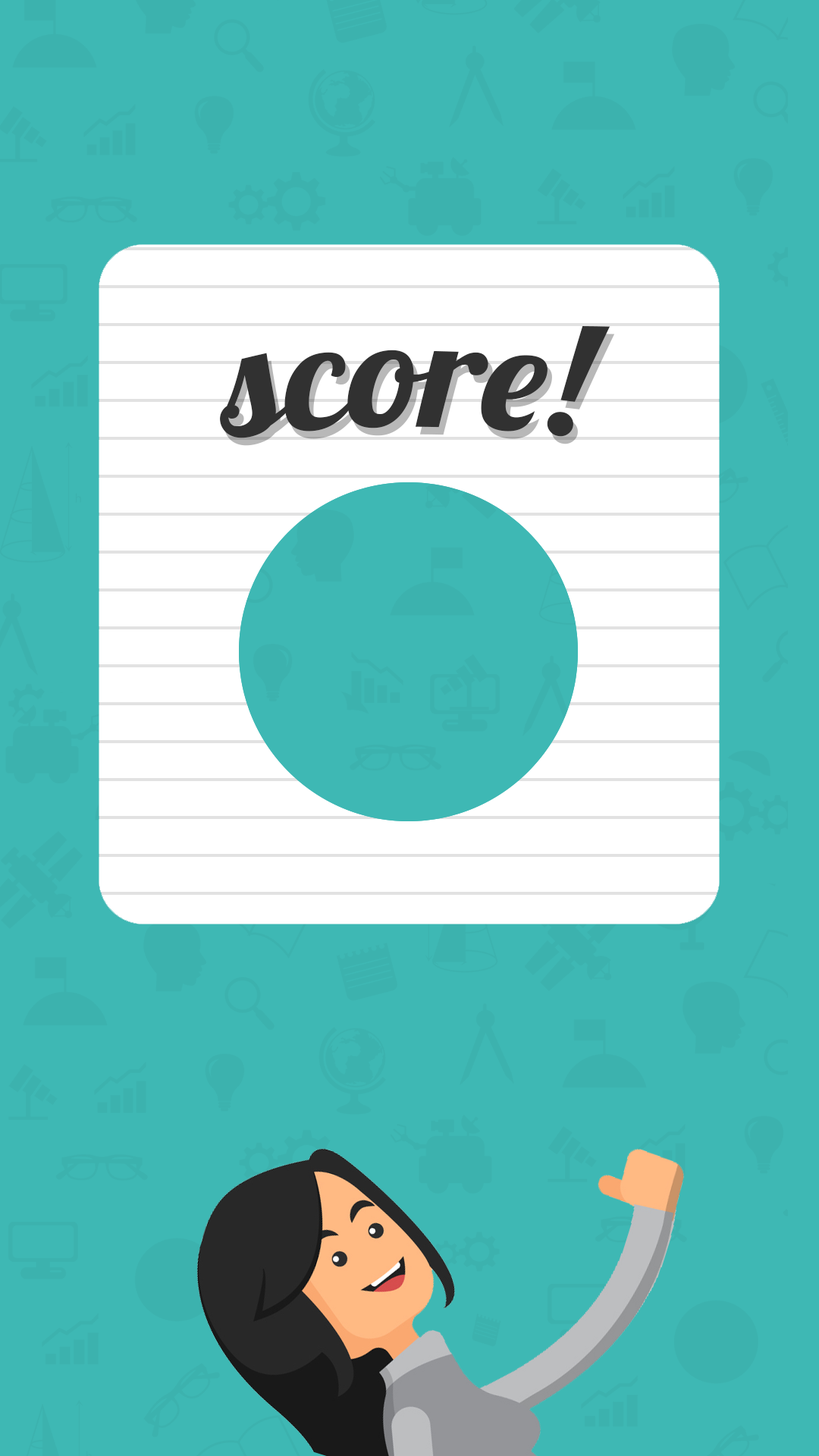
<style>
.page{position:relative;width:819px;height:1456px;background:#3eb8b4}
.page>*{position:absolute;margin:0}
.t1{font:151.7px "Lobster-Regular";color:#313131}
</style>
<div class="page">
<p class="t1" style="left:220px;top:326px;width:390px;height:112px">score!</p>
</div>
